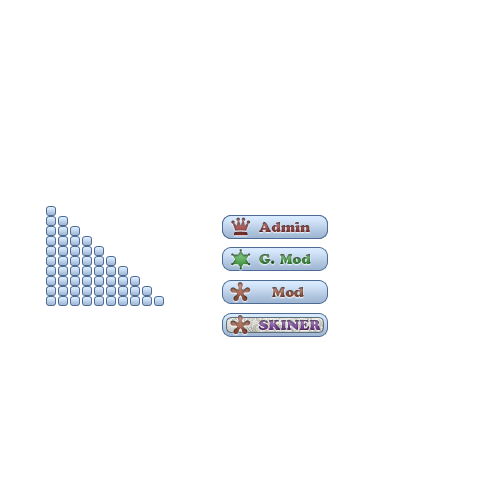
<style>
.page{position:relative;width:500px;height:500px;background:#ffffff}
.page>*{position:absolute;margin:0}
.t1{font:14px "CooperBlackStd";color:#7f4444}
.t2{font:14px "CooperBlackStd"}
</style>
<div class="page">
<p class="t1" style="left:259px;top:222px;width:51px;height:10px">Admin</p>
<p class="t1" style="left:259px;top:222px;width:51px;height:10px">Admin</p>
<p class="t2" style="left:259px;top:254px;width:52px;height:10px">G. Mod</p>
<p class="t2" style="left:272px;top:287px;width:32px;height:10px">Mod</p>
<p class="t2" style="left:259px;top:319px;width:62px;height:11px">SKINER</p>
</div>
